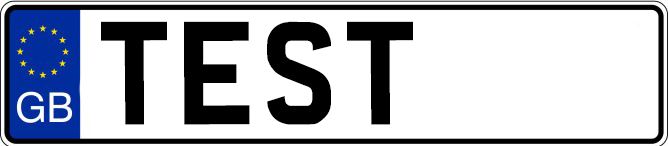
<style>
.page{position:relative;width:668px;height:146px;background:#ffffff}
.page>*{position:absolute;margin:0}
.t1{font:150px "UKNumberPlate";color:#000000}
</style>
<div class="page">
<p class="t1" style="left:101px;top:21px;width:312px;height:104px">Test</p>
</div>
